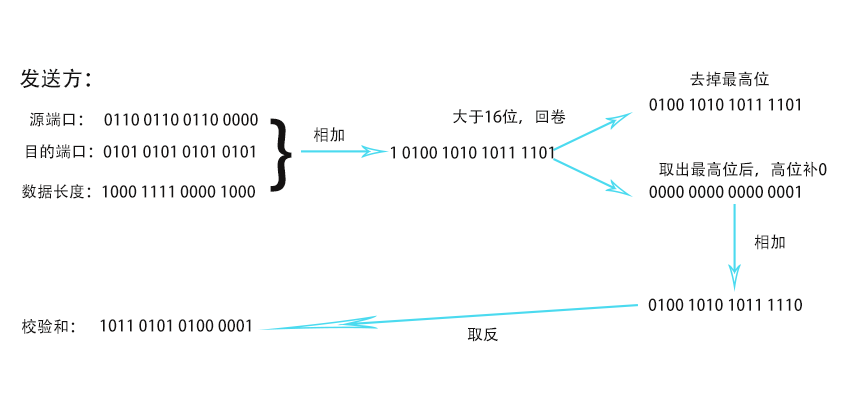
<style>
.page{position:relative;width:856px;height:413px;background:#ffffff}
.page>*{position:absolute;margin:0}
.t1{font:21.3px "AdobeHeitiStd-Regular";color:#141212}
.t2{font:16px "AdobeHeitiStd-Regular";color:#141212}
.t3{font:80.7px "AdobeHeitiStd-Regular";color:#141212}
</style>
<div class="page">
<p class="t1" style="left:20px;top:68px;width:70px;height:20px">发送方：</p>
<p class="t2" style="left:690px;top:71px;width:79px;height:16px">去掉最高位</p>
<p class="t2" style="left:649px;top:98px;width:151px;height:13px">0100 1010 1011 1101</p>
<p class="t2" style="left:30px;top:112px;width:228px;height:15px">源端口：   0110 0110 0110 0000</p>
<p class="t2" style="left:453px;top:109px;width:113px;height:15px">大于16位，回卷</p>
<p class="t3" style="left:270px;top:118px;width:22px;height:74px">}</p>
<p class="t2" style="left:313px;top:127px;width:31px;height:15px">相加</p>
<p class="t2" style="left:26px;top:144px;width:229px;height:15px">目的端口：0101 0101 0101 0101</p>
<p class="t2" style="left:390px;top:146px;width:164px;height:13px">1 0100 1010 1011 1101</p>
<p class="t2" style="left:659px;top:161px;width:168px;height:16px">取出最高位后，高位补0</p>
<p class="t2" style="left:21px;top:184px;width:234px;height:15px">数据长度：1000 1111 0000 1000</p>
<p class="t2" style="left:649px;top:185px;width:151px;height:13px">0000 0000 0000 0001</p>
<p class="t2" style="left:754px;top:234px;width:31px;height:16px">相加</p>
<p class="t2" style="left:648px;top:298px;width:154px;height:13px">0100 1010 1011 1110</p>
<p class="t2" style="left:22px;top:319px;width:53px;height:15px">校验和：</p>
<p class="t2" style="left:100px;top:319px;width:151px;height:13px">1011 0101 0100 0001</p>
<p class="t2" style="left:467px;top:327px;width:31px;height:15px">取反</p>
</div>
